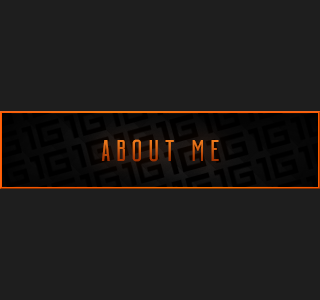
<style>
.page{position:relative;width:320px;height:300px;background:#1e1e1e}
.page>*{position:absolute;margin:0}
.t1{font:30px "Building-CondensedMedium";letter-spacing:0.2em}
</style>
<div class="page">
<p class="t1" style="left:101px;top:139px;width:118px;height:23px">ABOUT ME</p>
</div>
